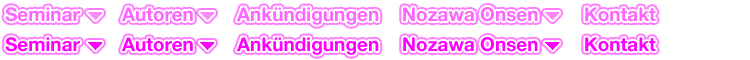
<style>
.page{position:relative;width:750px;height:60px;background:#ffffff}
.page>*{position:absolute;margin:0}
.t1{font:19px "HelveticaNeue-Bold";color:#ff66ff}
.t2{font:19px "HelveticaNeue-Bold";color:#ff00ff}
</style>
<div class="page">
<p class="t1" style="left:5px;top:7px;width:75px;height:15px">Seminar</p>
<p class="t1" style="left:5px;top:7px;width:75px;height:15px">Seminar</p>
<p class="t1" style="left:122px;top:7px;width:71px;height:15px">Autoren</p>
<p class="t1" style="left:122px;top:7px;width:71px;height:15px">Autoren</p>
<p class="t1" style="left:237px;top:7px;width:142px;height:18px">Ankündigungen</p>
<p class="t1" style="left:237px;top:7px;width:142px;height:18px">Ankündigungen</p>
<p class="t1" style="left:403px;top:7px;width:135px;height:15px">Nosawa Onsen</p>
<p class="t1" style="left:403px;top:7px;width:135px;height:15px">Nozawa Onsen</p>
<p class="t1" style="left:585px;top:7px;width:71px;height:15px">Kontakt</p>
<p class="t1" style="left:585px;top:7px;width:71px;height:15px">Kontakt</p>
<p class="t2" style="left:5px;top:37px;width:75px;height:15px">Seminar</p>
<p class="t2" style="left:5px;top:37px;width:75px;height:15px">Seminar</p>
<p class="t2" style="left:122px;top:37px;width:71px;height:15px">Autoren</p>
<p class="t2" style="left:122px;top:37px;width:71px;height:15px">Autoren</p>
<p class="t2" style="left:237px;top:37px;width:142px;height:18px">Ankündigungen</p>
<p class="t2" style="left:237px;top:37px;width:142px;height:18px">Ankündigungen</p>
<p class="t2" style="left:403px;top:37px;width:135px;height:15px">Nosawa Onsen</p>
<p class="t2" style="left:403px;top:37px;width:135px;height:15px">Nozawa Onsen</p>
<p class="t2" style="left:585px;top:37px;width:71px;height:15px">Kontakt</p>
<p class="t2" style="left:585px;top:37px;width:71px;height:15px">Kontakt</p>
</div>
